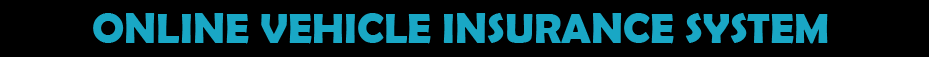
<style>
.page{position:relative;width:929px;height:57px;background:#000000}
.page>*{position:absolute;margin:0}
.t1{font:43px "BerlinSansFBDemi-Bold";color:#19a7c5}
</style>
<div class="page">
<p class="t1" style="left:93px;top:13px;width:735px;height:31px">ONLINE VEHICLE INSURANCE SYSTEM</p>
</div>
